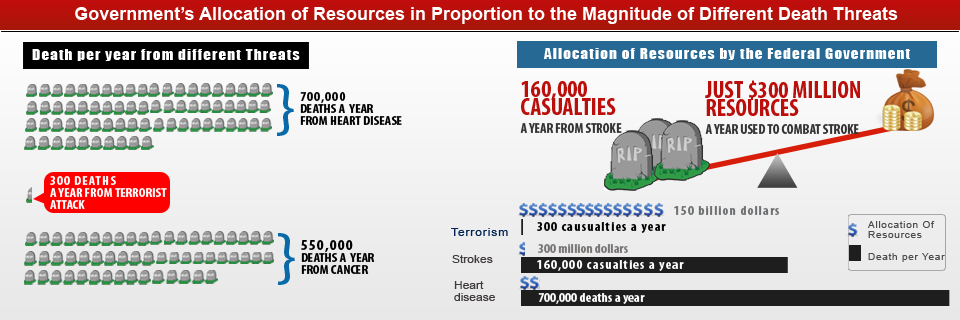
<style>
.page{position:relative;width:960px;height:320px}
.page>*{position:absolute;margin:0}
.t1{font:18px "Arial-BoldMT";color:#ffffff}
.t2{font:9px "Arial-ItalicMT";color:#ffffff}
.t3{font:13.5px "Impact";letter-spacing:0.075em;color:#ffffff;scale:1.11 1}
.t4{font:64.8px "MyriadPro-Regular";color:#0a6aa7;scale:1.11 1}
.t5{font:24px/18px "MyriadPro-BoldCond";color:#bb0f0c}
.t6{font:14px/18px "MyriadPro-BoldCond";color:#333131}
.t7{font:12.6px/12px "MyriadPro-BoldCond";color:#000000;scale:1.11 1}
.t8{font:12.6px/12px "MyriadPro-BoldCond";letter-spacing:0.075em;color:#000000;scale:1.11 1}
.t9{font:12.6px/12px "MyriadPro-BoldCond";color:#ffffff;scale:1.11 1}
.t10{font:12.6px/12px "MyriadPro-BoldCond";letter-spacing:0.075em;color:#ffffff;scale:1.11 1}
.t11{font:12.6px "MyriadPro-BoldCond";letter-spacing:0.075em;color:#6c6e70;scale:1.11 1}
.t12{font:12.6px "MyriadPro-BoldCond";letter-spacing:0.075em;color:#000000;scale:1.11 1}
.t13{font:9px/10px "ArialMT";letter-spacing:0.075em;color:#4d4c4c;scale:1.11 1}
.t14{font:9px/12px "ArialMT";letter-spacing:0.075em;color:#4d4c4c;scale:1.11 1}
.t15{font:10.8px "ArialMT";letter-spacing:0.075em;color:#002254;scale:1.11 1}
.t16{font:14.4px/12px "MyriadPro-BoldCond";letter-spacing:0.075em;color:#000000;scale:1.11 1}
.t17{font:12.6px "MyriadPro-BoldCond";color:#797575;scale:1.11 1}
.t18{font:10.8px "ArialMT";color:#3f3b3b;scale:1.11 1}
.t19{font:12.6px "MyriadPro-BoldCond";letter-spacing:0.075em;color:#ffffff;scale:1.11 1}
.t20{font:10.8px/12px "ArialMT";color:#3f3b3b;scale:1.11 1}
.t21{font:12.6px "MyriadPro-BoldCond";color:#ffffff;scale:1.11 1}
</style>
<div class="page">
<p class="t1" style="left:75px;top:7px;width:823px;height:17px"><span class="t2"><br></span>Government’s Allocation of Resources in Proportion to the Magnitude of Different Death Threats</p>
<p class="t3" style="left:32px;top:49px;width:268px;height:12px">Death per year from different Threats</p>
<p class="t3" style="left:544px;top:48px;width:366px;height:12px">Allocation of Resources by the Federal Government</p>
<p class="t4" style="left:277px;top:84px;width:17px;height:52px">}</p>
<p class="t5" style="left:520px;top:81px;width:102px;height:52px">160,000 CASUALTIES <span class="t6">A YEAR FROM STROKE</span></p>
<p class="t6" style="left:705px;top:80px;width:155px;height:54px"><span class="t5">JUST $300 MILLION RESOURCES<br></span>A YEAR USED TO COMBAT STROKE</p>
<p class="t7" style="left:300px;top:92px;width:102px;height:33px"><span class="t8">700,000 <br></span>DEATHS A  YEAR <br>FROM HEART DISEASE</p>
<p class="t9" style="left:50px;top:176px;width:117px;height:33px"><span class="t10">300 DEATHS </span><br>A YEAR FROM TERRORIST <br>ATTACK</p>
<p class="t11" style="left:674px;top:206px;width:105px;height:9px">150 billion dollars</p>
<p class="t12" style="left:537px;top:222px;width:129px;height:11px">300 causualties a year</p>
<p class="t13" style="left:867px;top:221px;width:78px;height:41px">Allocation Of Resources<br><br>Death per Yea<span class="t14">r</span></p>
<p class="t4" style="left:278px;top:233px;width:17px;height:52px">}</p>
<p class="t15" style="left:451px;top:228px;width:57px;height:8px">Terrorism</p>
<p class="t7" style="left:301px;top:240px;width:74px;height:34px"><span class="t16">550,000<br></span>DEATHS A  YEAR <br>FROM CANCER</p>
<p class="t17" style="left:538px;top:244px;width:90px;height:9px">300 million dollars</p>
<p class="t18" style="left:452px;top:255px;width:41px;height:8px">Strokes</p>
<p class="t19" style="left:537px;top:260px;width:147px;height:11px">160,000 casualties a year</p>
<p class="t20" style="left:454px;top:281px;width:41px;height:20px">Heart disease</p>
<p class="t21" style="left:538px;top:293px;width:107px;height:11px">700,000 deaths a year</p>
</div>
